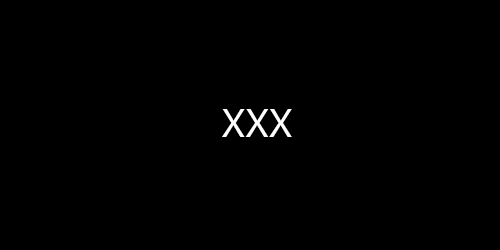
<style>
.page{position:relative;width:500px;height:250px;background:#000000}
.page>*{position:absolute;margin:0}
.t1{font:40px "SegoeUI";color:#ffffff}
</style>
<div class="page">
<p class="t1" style="left:222px;top:109px;width:70px;height:28px">XXX</p>
</div>
